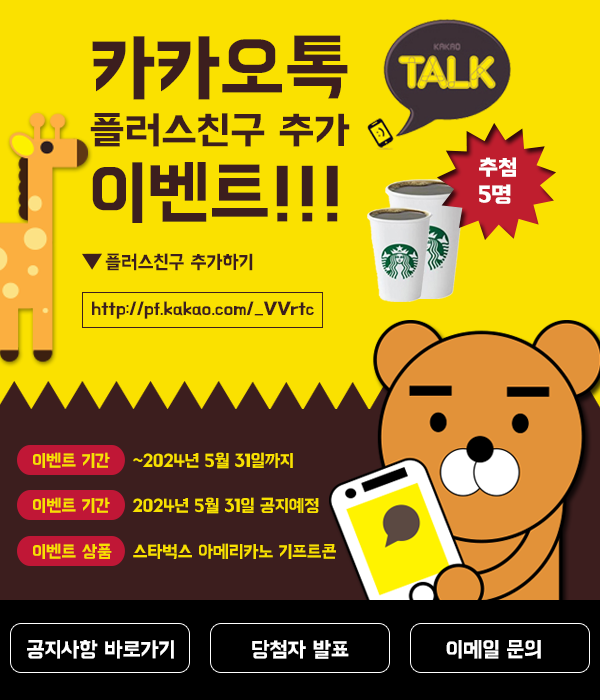
<style>
.page{position:relative;width:600px;height:700px;background:#fae100}
.page>*{position:absolute;margin:0}
.t1{font:76.1px "BMHANNAPro";letter-spacing:-0.02em;color:#3c1e1e}
.t2{font:39.5px "BMHANNAPro";letter-spacing:-0.02em;color:#3c1e1e;scale:1.08 1}
.t3{font:22.6px "BMHANNAPro";letter-spacing:-0.02em;color:#ffffff;font-weight:bold}
.t4{font:72.5px "BMHANNAPro";letter-spacing:-0.02em;color:#3c1e1e}
.t5{font:19.8px "BMHANNAPro";letter-spacing:-0.02em;color:#3c1e1e}
.t6{font:18.3px "BMHANNAPro";letter-spacing:-0.02em;color:#3c1e1e;scale:1.06 1}
.t7{font:18px "BMHANNAPro";letter-spacing:-0.02em;color:#f8e000}
.t8{font:22px "BMHANNAPro";letter-spacing:-0.02em;color:#ffffff}
</style>
<div class="page">
<p class="t1" style="left:92px;top:35px;width:256px;height:65px">카카오톡</p>
<p class="t2" style="left:90px;top:113px;width:260px;height:34px">플러스친구 추가</p>
<p class="t3" style="left:479px;top:157px;width:37px;height:47px">추첨<br>5명</p>
<p class="t4" style="left:92px;top:162px;width:246px;height:61px">이벤트!!!</p>
<p class="t5" style="left:105px;top:253px;width:148px;height:18px">플러스친구 추가하기</p>
<p class="t6" style="left:92px;top:301px;width:222px;height:18px">http://pf.kakao.com/_VVrtc</p>
<p class="t7" style="left:33px;top:452px;width:77px;height:16px">이벤트 기간</p>
<p class="t7" style="left:133px;top:452px;width:160px;height:17px">~2024년 5월 31일까지</p>
<p class="t7" style="left:33px;top:497px;width:77px;height:16px">이벤트 기간</p>
<p class="t7" style="left:132px;top:497px;width:187px;height:17px">2024년 5월 31일 공지예정</p>
<p class="t7" style="left:33px;top:543px;width:79px;height:16px">이벤트 상품</p>
<p class="t7" style="left:133px;top:543px;width:203px;height:16px">스타벅스 아메리카노 기프트콘</p>
<p class="t8" style="left:27px;top:640px;width:147px;height:19px">공지사항 바로가기</p>
<p class="t8" style="left:252px;top:640px;width:97px;height:19px">당첨자 발표</p>
<p class="t8" style="left:446px;top:640px;width:95px;height:19px">이메일 문의</p>
</div>
